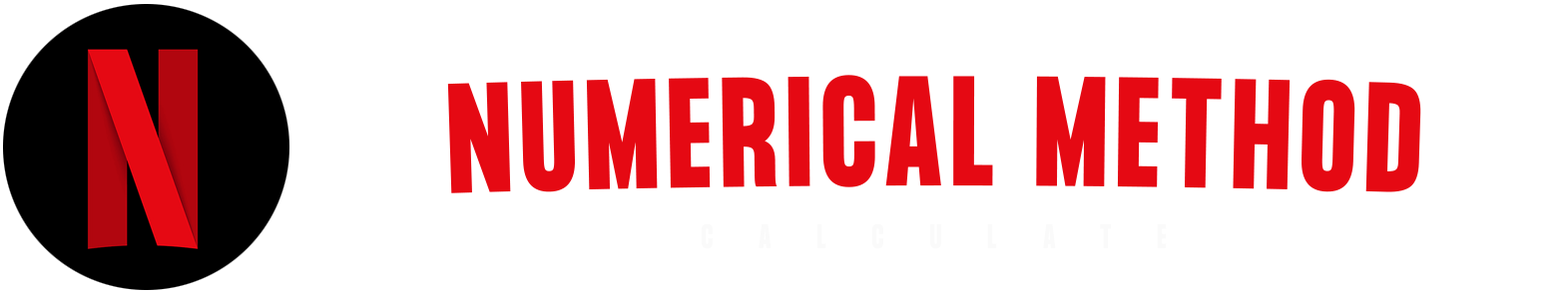
<style>
.page{position:relative;width:1568px;height:293px;background:#ffffff}
.page>*{position:absolute;margin:0}
.t1{font:136.8px "FormulaCondensed-Bold";letter-spacing:0.08em;color:#e50913;text-transform:uppercase}
</style>
<div class="page">
<p class="t1" style="left:447px;top:75px;width:974px;height:119px">NUMERICAL METHOD</p>
</div>
